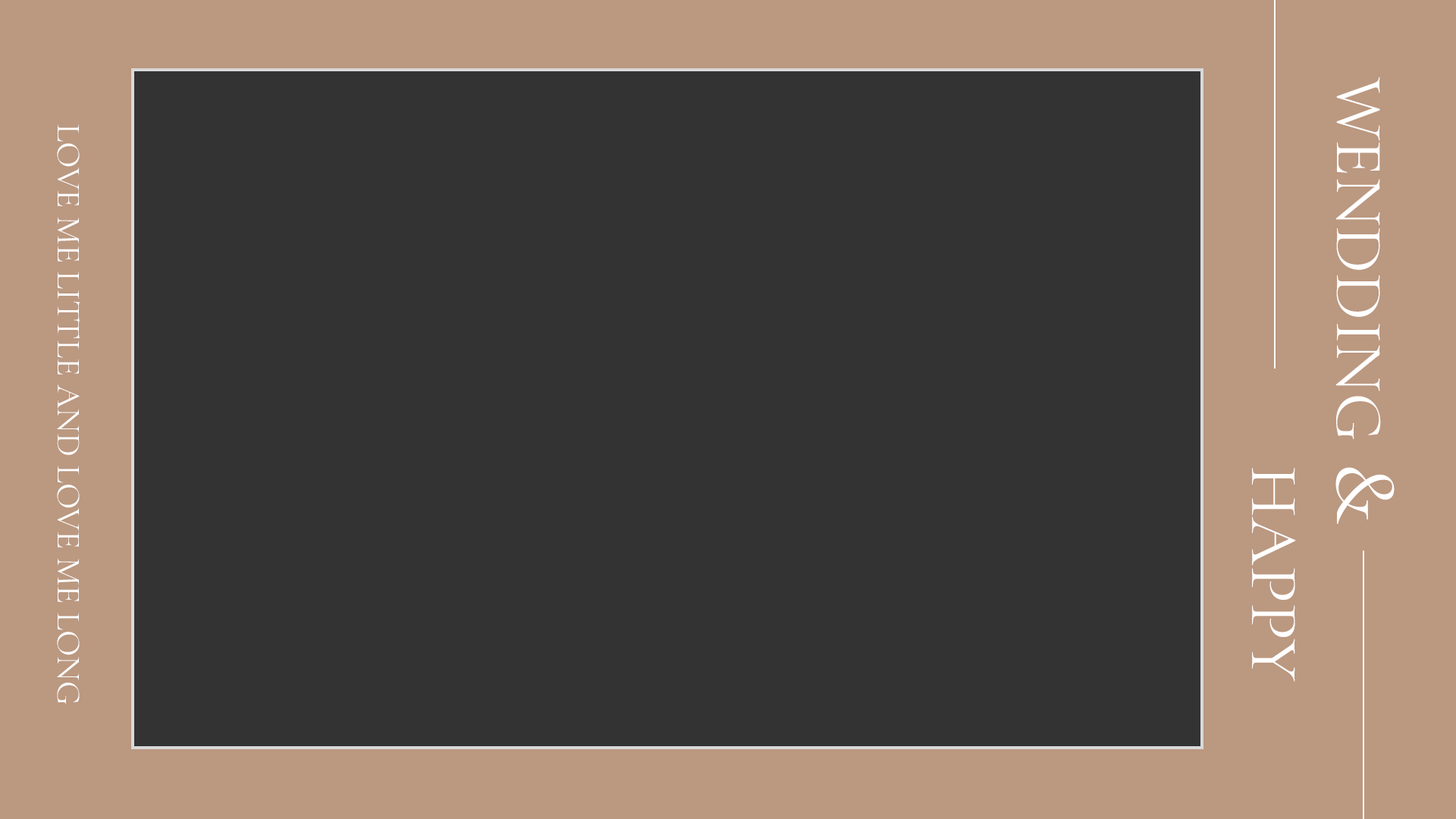
<style>
.page{position:relative;width:1456px;height:819px;background:#333333}
.page>*{position:absolute;margin:0}
.t1{font:68.2px/85.3px "CormorantInfant-Regular";color:#ffffff}
.t2{font:88.5px/85.3px "CormorantInfant-Regular";color:#ffffff}
.t3{font:34.1px "CormorantInfant-Regular";color:#ffffff;text-transform:uppercase}
</style>
<div class="page">
<p class="t1" style="left:1252px;top:77px;width:143px;height:605px;text-align:center;rotate:90deg">WENDDING<span class="t2"> &amp;<br>                    </span>HAPPY</p>
<p class="t3" style="left:57px;top:124px;width:23px;height:580px;rotate:90deg">LOve ME LITTLE AND LOVE ME LONG</p>
</div>
